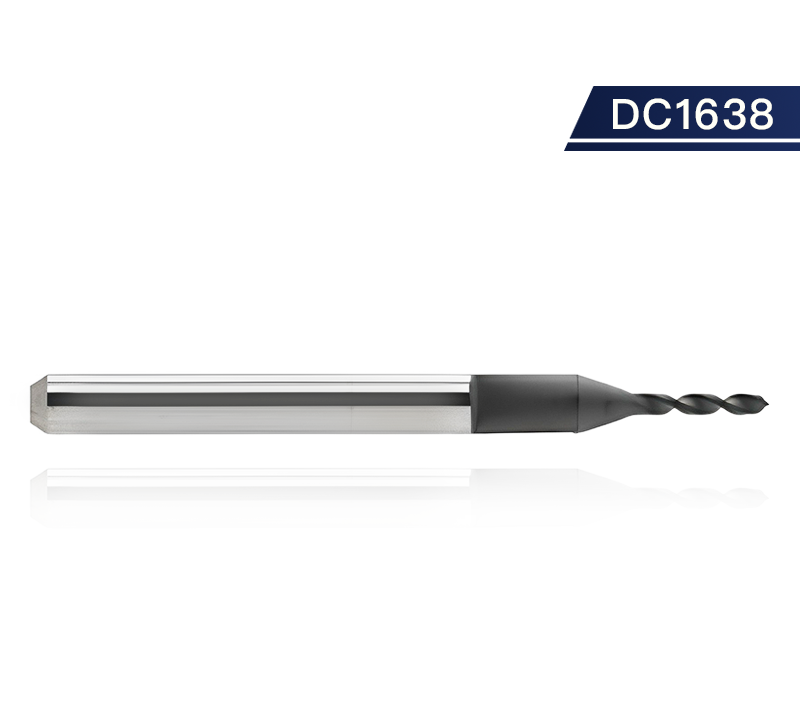
<style>
.page{position:relative;width:800px;height:720px;background:#ffffff}
.page>*{position:absolute;margin:0}
.t1{font:42px "PingFangTC-Semibold";letter-spacing:0.05em;color:#fffff7}
</style>
<div class="page">
<p class="t1" style="left:613px;top:98px;width:160px;height:32px">DC1638</p>
</div>
